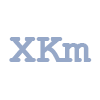
<style>
.page{position:relative;width:100px;height:100px;background:#ffffff}
.page>*{position:absolute;margin:0}
.t1{font:44.5px "CourierNewPS-BoldMT";color:#96a8c8}
</style>
<div class="page">
<p class="t1" style="left:9px;top:37px;width:83px;height:25px">XKm</p>
</div>
